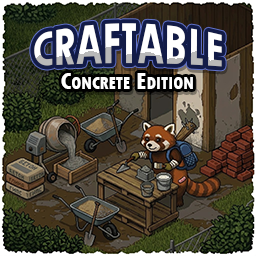
<style>
.page{position:relative;width:256px;height:256px}
.page>*{position:absolute;margin:0}
.t1{font:47px "TwCenMT-CondensedExtraBold";color:#ffffff;text-transform:uppercase}
.t2{font:47px "TwCenMT-CondensedExtraBold";color:#ffffff;font-variant:small-caps}
.t3{font:25px "TwCenMT-CondensedExtraBold";color:#ffffff;font-variant:small-caps}
</style>
<div class="page">
<p class="t1" style="left:34px;top:23px;width:188px;height:44px"><span class="t2">C</span>raftable</p>
<p class="t3" style="left:61px;top:73px;width:132px;height:16px">Concrete Edition</p>
</div>
